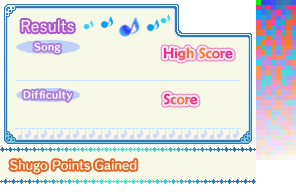
<style>
.page{position:relative;width:296px;height:192px;background:#f8f8e8}
.page>*{position:absolute;margin:0}
.t1{font:16px "YuGothic-Medium";color:#f8d9f6}
.t2{font:9px "HummingStd-E";letter-spacing:0.05em;color:#f8f8f8}
.t3{font:15px "BerlinSansFB-Reg";font-weight:bold}
.t4{font:11px "HummingStd-D";letter-spacing:0.025em;color:#f8f0d8}
</style>
<div class="page">
<p class="t1" style="left:21px;top:19px;width:53px;height:14px">Results</p>
<p class="t2" style="left:34px;top:42px;width:27px;height:11px">Song</p>
<p class="t3" style="left:163px;top:47px;width:70px;height:14px">High Score</p>
<p class="t2" style="left:23px;top:90px;width:49px;height:11px">Difficulty</p>
<p class="t3" style="left:164px;top:93px;width:34px;height:12px">Score</p>
<p class="t4" style="left:10px;top:159px;width:127px;height:14px">Shugo Points Gained</p>
</div>
